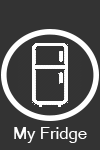
<style>
.page{position:relative;width:100px;height:150px;background:#333333}
.page>*{position:absolute;margin:0}
.t1{font:16.7px "MicrosoftSansSerif";color:#ffffff}
</style>
<div class="page">
<p class="t1" style="left:14px;top:127px;width:73px;height:16px">My Fridge</p>
</div>
